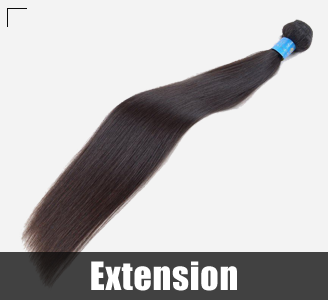
<style>
.page{position:relative;width:328px;height:300px;background:#f3f3f3}
.page>*{position:absolute;margin:0}
.t1{font:36px "Impact";letter-spacing:0.02em;color:#ffffff}
</style>
<div class="page">
<p class="t1" style="left:91px;top:261px;width:146px;height:30px">Extension</p>
</div>
